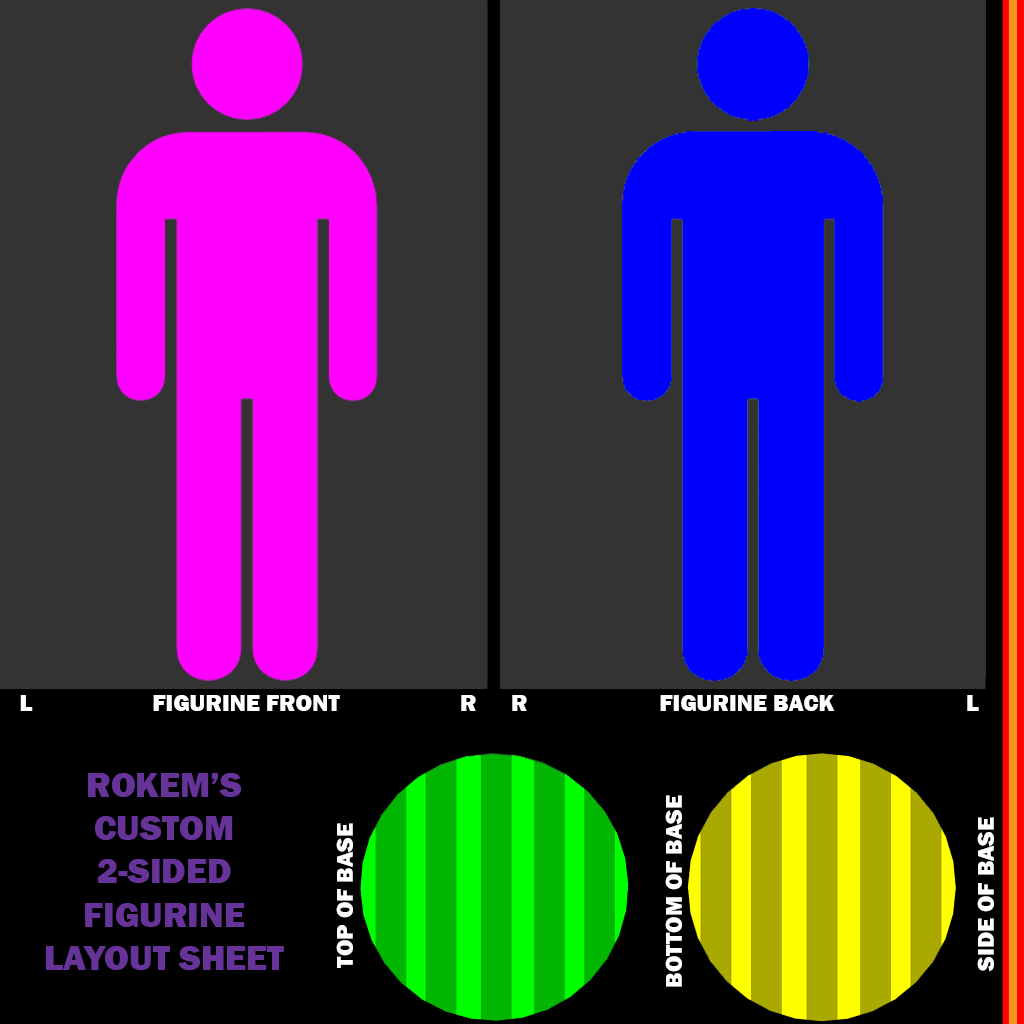
<style>
.page{position:relative;width:1024px;height:1024px;background:#333333}
.page>*{position:absolute;margin:0}
.t1{font:24px "FranklinGothic-Heavy";color:#ffffff}
.t2{font:36px "FranklinGothic-Heavy";color:#663399}
.t3{font:23.7px "FranklinGothic-Heavy";color:#ffffff}
</style>
<div class="page">
<p class="t1" style="left:20px;top:695px;width:456px;height:16px">L                    FIGURINE FRONT                    R</p>
<p class="t1" style="left:512px;top:695px;width:467px;height:16px">R                      FIGURINE BACK                      L</p>
<p class="t2" style="left:46px;top:773px;width:238px;height:197px;text-align:center">ROKEM’S CUSTOM<br>2-SIDED FIGURINE LAYOUT SHEET</p>
<p class="t3" style="left:665px;top:795px;width:17px;height:192px;rotate:-90deg">BOTTOM OF BASE</p>
<p class="t3" style="left:977px;top:817px;width:17px;height:155px;rotate:-90deg">SIDE OF BASE</p>
<p class="t3" style="left:336px;top:823px;width:17px;height:145px;rotate:-90deg">TOP OF BASE</p>
</div>
